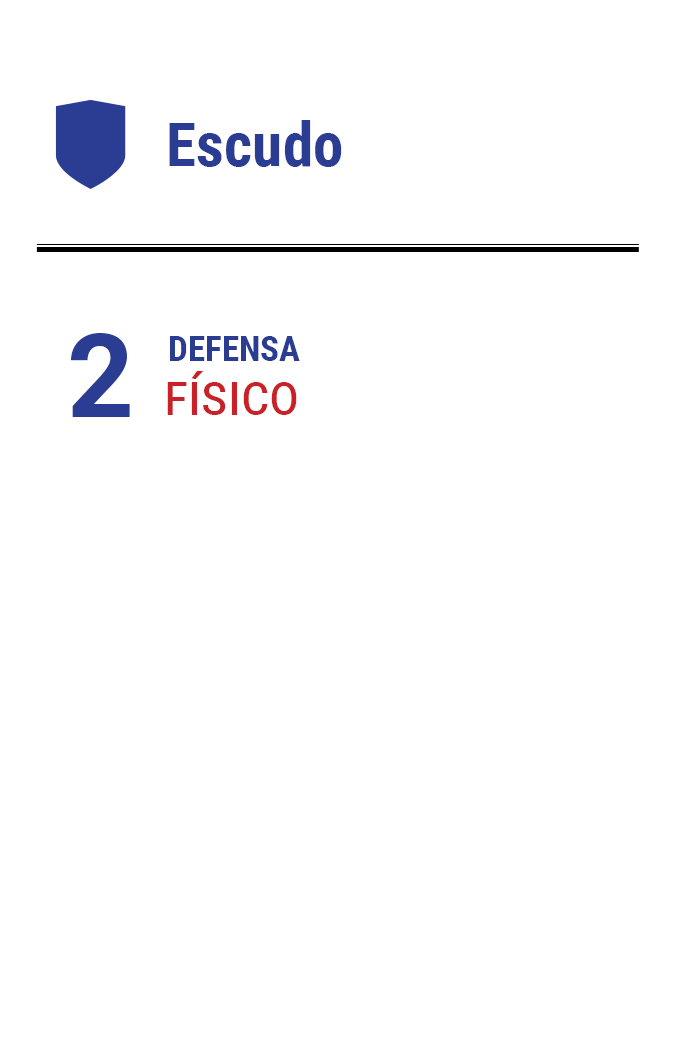
<style>
.page{position:relative;width:675px;height:1050px;background:#ffffff}
.page>*{position:absolute;margin:0}
.t1{font:61.2px "RobotoCondensed-Bold";color:#2a3d93}
.t2{font:116.7px "Roboto-Bold";letter-spacing:-0.16em;color:#2a3d93}
.t3{font:35px "RobotoCondensed-Bold";color:#2a3d93}
.t4{font:58.3px "RobotoCondensed-Regular";color:#c82127;font-variant:small-caps}
</style>
<div class="page">
<p class="t1" style="left:169px;top:120px;width:173px;height:47px">Escudo</p>
<p class="t2" style="left:71px;top:333px;width:59px;height:84px">2</p>
<p class="t3" style="left:170px;top:336px;width:130px;height:25px">DEFENSA</p>
<p class="t4" style="left:167px;top:371px;width:130px;height:44px">físico</p>
</div>
